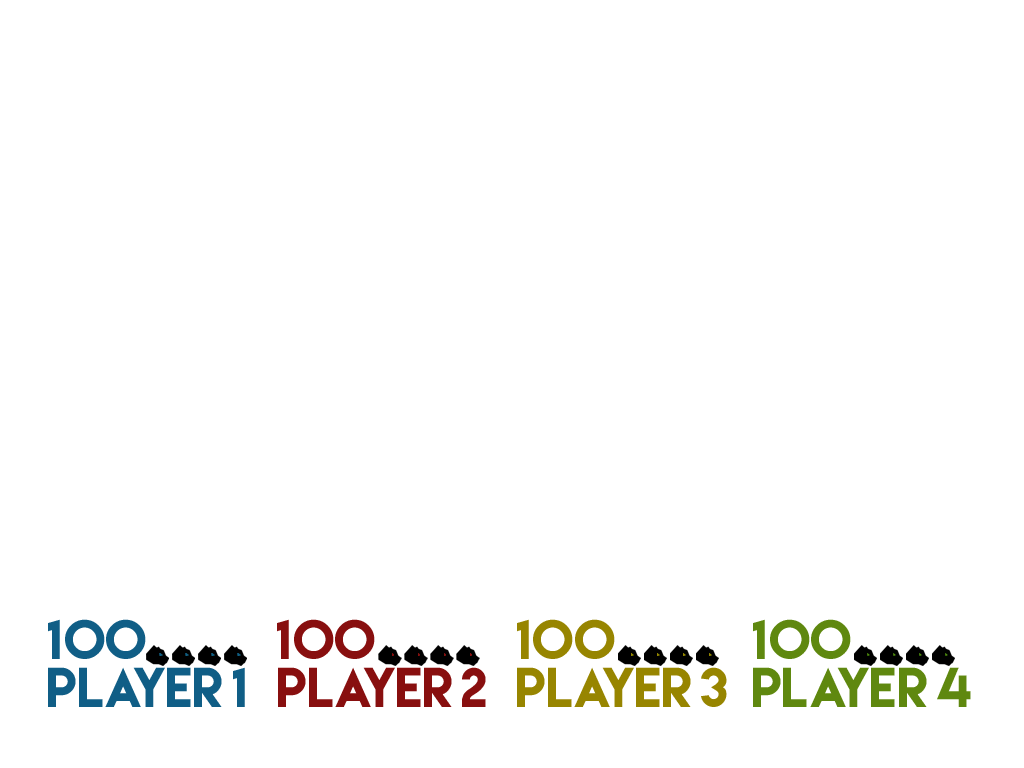
<style>
.page{position:relative;width:1024px;height:768px;background:#ffffff}
.page>*{position:absolute;margin:0}
.t1{font:49.9px "LemonMilk";color:#105e86}
.t2{font:49.9px "LemonMilk";color:#880f0f}
.t3{font:49.9px "LemonMilk";color:#978500}
.t4{font:49.9px "LemonMilk";color:#5f880f}
.t5{font:49.9px "LemonMilk";letter-spacing:-0.17em;color:#105e86}
.t6{font:49.9px "LemonMilk";letter-spacing:-0.17em;color:#880f0f}
.t7{font:49.9px "LemonMilk";letter-spacing:-0.17em;color:#978500}
.t8{font:49.9px "LemonMilk";letter-spacing:-0.17em;color:#5f880f}
</style>
<div class="page">
<p class="t1" style="left:48px;top:619px;width:98px;height:40px">100</p>
<p class="t2" style="left:277px;top:619px;width:98px;height:40px">100</p>
<p class="t3" style="left:517px;top:619px;width:98px;height:40px">100</p>
<p class="t4" style="left:753px;top:619px;width:98px;height:40px">100</p>
<p class="t1" style="left:48px;top:667px;width:197px;height:40px">Pl<span class="t5">a</span>yer 1</p>
<p class="t2" style="left:278px;top:667px;width:208px;height:40px">Pl<span class="t6">a</span>yer 2</p>
<p class="t3" style="left:517px;top:667px;width:210px;height:40px">Pl<span class="t7">a</span>yer 3</p>
<p class="t4" style="left:753px;top:667px;width:218px;height:40px">Pl<span class="t8">a</span>yer 4</p>
</div>
